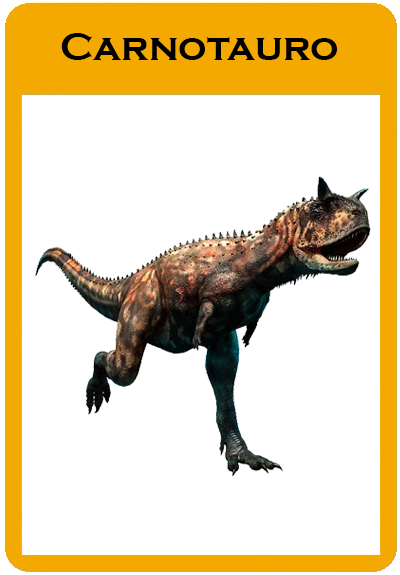
<style>
.page{position:relative;width:400px;height:575px;background:#ffffff}
.page>*{position:absolute;margin:0}
.t1{font:40px "CopperplateGothic-Bold";color:#000000}
</style>
<div class="page">
<p class="t1" style="left:61px;top:33px;width:276px;height:27px">Carnotauro</p>
</div>
